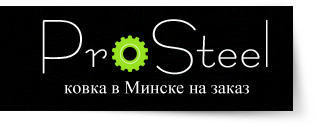
<style>
.page{position:relative;width:317px;height:127px;background:#000000}
.page>*{position:absolute;margin:0}
.t1{font:80px "Konkord-Retro";color:#fffefe}
.t2{font:18px "TimesNewRomanPSMT";color:#ffffff}
</style>
<div class="page">
<p class="t1" style="left:42px;top:20px;width:65px;height:54px">Pr</p>
<p class="t1" style="left:152px;top:19px;width:116px;height:56px">Steel</p>
<p class="t2" style="left:64px;top:81px;width:185px;height:13px">ковка в Минске на заказ</p>
</div>
